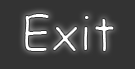
<style>
.page{position:relative;width:135px;height:69px;background:#333333}
.page>*{position:absolute;margin:0}
.t1{font:48px "ComicSansMS"}
</style>
<div class="page">
<p class="t1" style="left:24px;top:13px;width:91px;height:39px">Exit</p>
</div>
